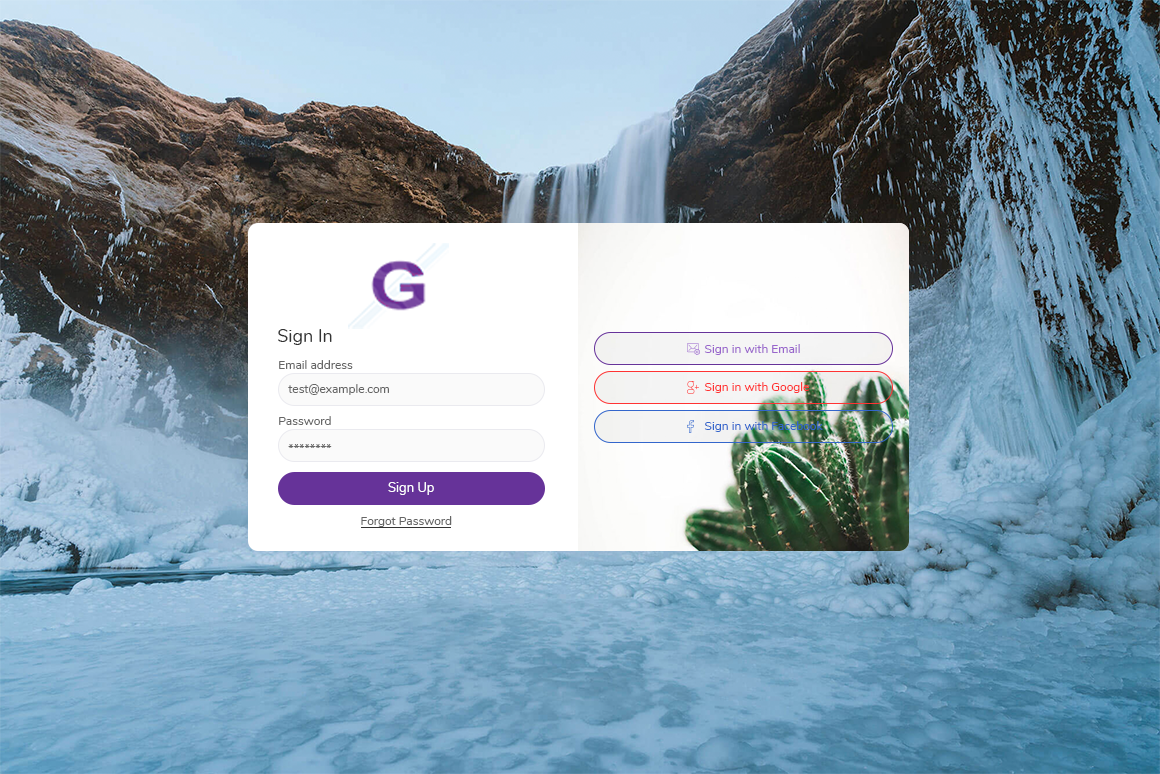
<style>
.page{position:relative;width:1160px;height:774px}
.page>*{position:absolute;margin:0}
.t1{font:18px "Nunito-Regular";color:#333333}
.t2{font:12px "Nunito-Regular";color:#9966cc}
.t3{font:12px "Nunito-Regular";color:#666666}
.t4{font:12px "Nunito-Regular";color:#ff3333}
.t5{font:12px "Nunito-Regular";color:#3366cc}
.t6{font:13px "Nunito-Regular";color:#ffffff}
</style>
<div class="page">
<p class="t1" style="left:278px;top:329px;width:54px;height:16px">Sign In</p>
<p class="t2" style="left:704px;top:344px;width:96px;height:11px">Sign in with Email</p>
<p class="t3" style="left:279px;top:360px;width:74px;height:9px">Email address</p>
<p class="t3" style="left:288px;top:384px;width:101px;height:11px">test@example.com</p>
<p class="t4" style="left:704px;top:382px;width:105px;height:11px">Sign in with Google</p>
<p class="t3" style="left:279px;top:416px;width:52px;height:9px">Password</p>
<p class="t5" style="left:704px;top:421px;width:119px;height:11px">Sign in with Facebook</p>
<p class="t3" style="left:288px;top:444px;width:44px;height:4px">********</p>
<p class="t6" style="left:388px;top:482px;width:46px;height:13px">Sign Up</p>
<p class="t3" style="left:361px;top:516px;width:91px;height:11px">Forgot Password</p>
</div>
